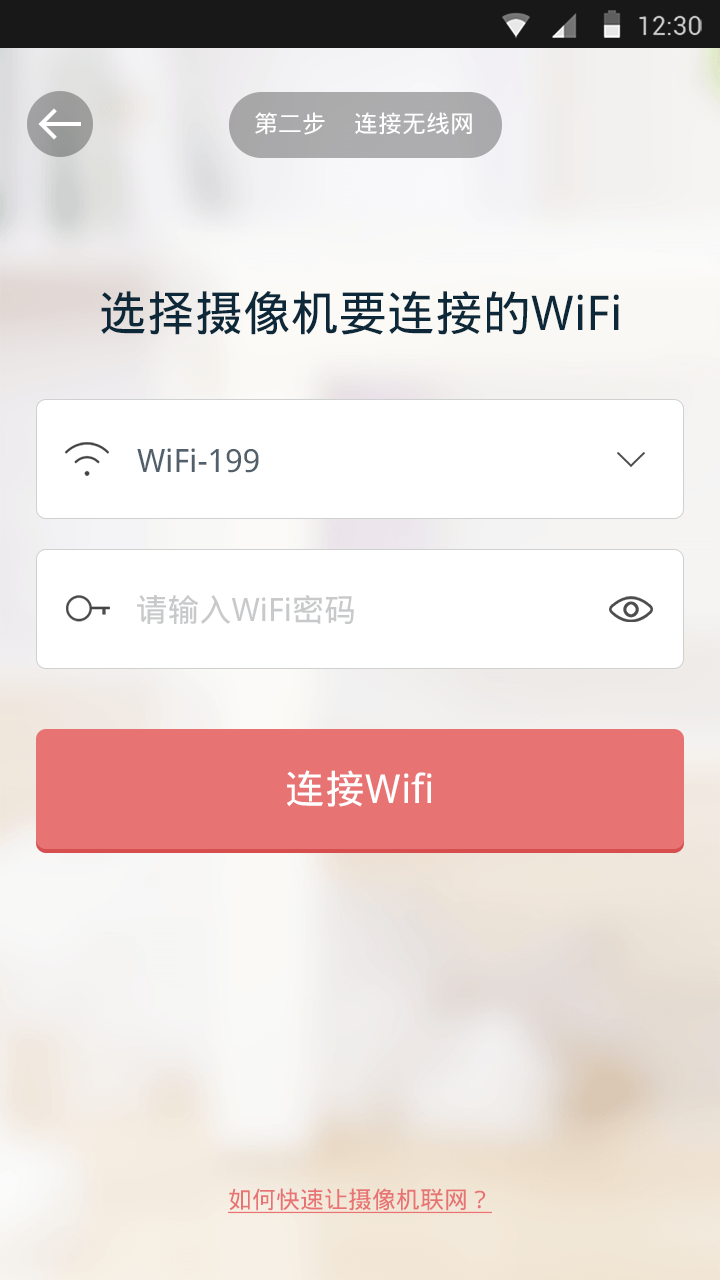
<style>
.page{position:relative;width:720px;height:1280px}
.page>*{position:absolute;margin:0}
.t1{font:24px "DroidSansFallback";color:#ffffff}
.t2{font:48px "DroidSansFallback";color:#0c2839}
.t3{font:32px "DroidSansFallback";color:#51606a}
.t4{font:32px "DroidSansFallback";color:#c8c9ca}
.t5{font:40px "DroidSansFallback";color:#ffffff}
.t6{font:24px "DroidSansFallback";color:#e87373;text-decoration:underline}
</style>
<div class="page">
<p class="t1" style="left:255px;top:112px;width:70px;height:23px">第二步</p>
<p class="t1" style="left:355px;top:112px;width:117px;height:23px">连接无线网</p>
<p class="t2" style="left:101px;top:291px;width:518px;height:44px">选择摄像机要连接的WiFi</p>
<p class="t3" style="left:137px;top:448px;width:122px;height:25px">WiFi-199</p>
<p class="t4" style="left:137px;top:595px;width:217px;height:29px">请输入WiFi密码</p>
<p class="t5" style="left:287px;top:770px;width:145px;height:37px">连接Wifi</p>
<p class="t6" style="left:228px;top:1188px;width:264px;height:26px">如何快速让摄像机联网？</p>
</div>
